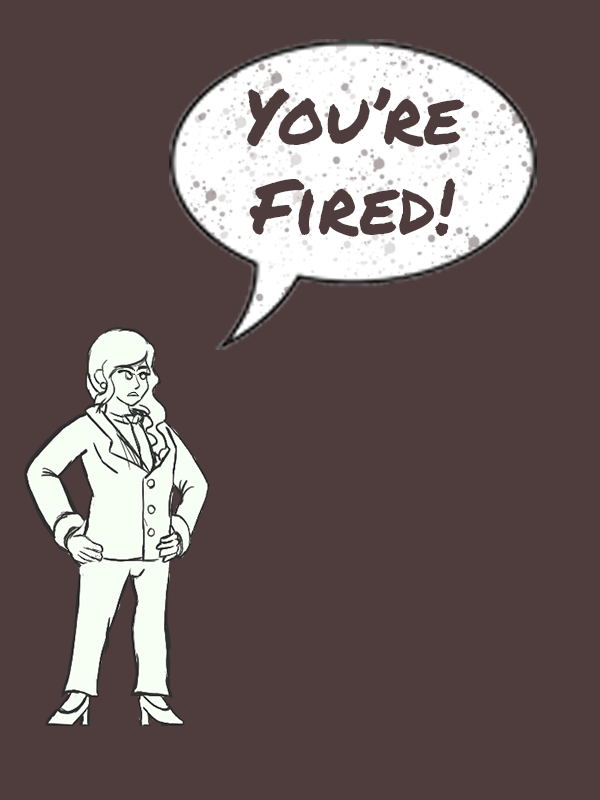
<style>
.page{position:relative;width:600px;height:800px;background:#4f3d3d}
.page>*{position:absolute;margin:0}
.t1{font:75px "PermanentMarker";color:#4f3d3d}
</style>
<div class="page">
<p class="t1" style="left:247px;top:86px;width:217px;height:151px;text-align:center">You’re Fired!</p>
</div>
